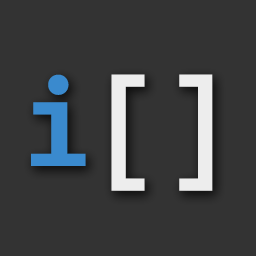
<style>
.page{position:relative;width:256px;height:256px;background:#333333}
.page>*{position:absolute;margin:0}
.t1{font:128px "Consolas-Bold";color:#ededed}
.t2{font:128px "Consolas-Bold";color:#3a8ace}
</style>
<div class="page">
<p class="t1" style="left:31px;top:74px;width:182px;height:117px"><span class="t2">i</span>[]</p>
</div>
